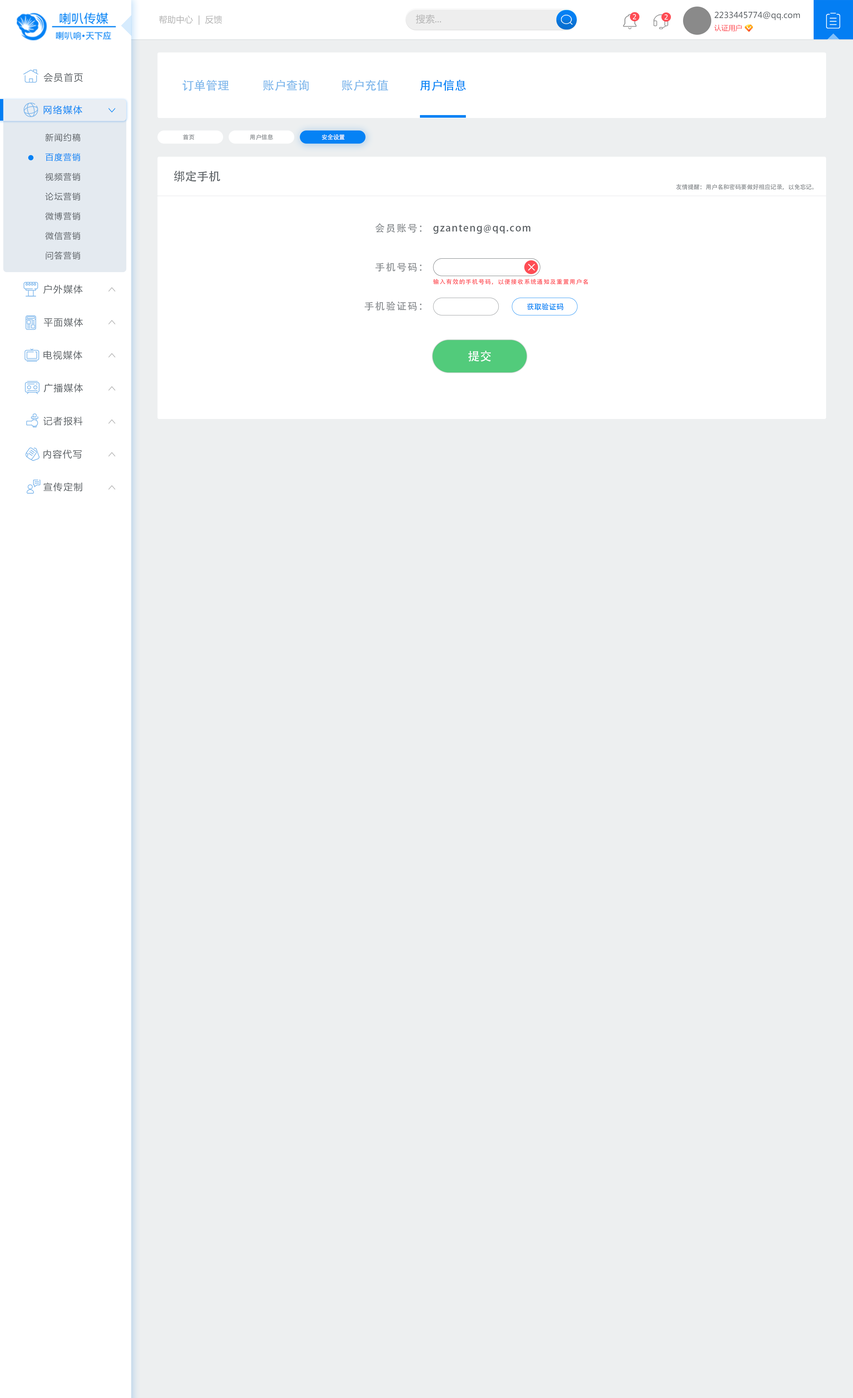
<style>
.page{position:relative;width:853px;height:1398px;background:#edeff0}
.page>*{position:absolute;margin:0}
.t1{font:8.6px "MicrosoftYaHei";color:#b4b4b4}
.t2{font:9.4px "MicrosoftYaHei";color:#b4b4b4}
.t3{font:6.9px "Tahoma";letter-spacing:0.1em;color:#ffffff;text-transform:uppercase}
.t4{font:8.2px/12.3px "MicrosoftYaHei";color:#5c6165}
.t5{font:7.1px/12.3px "MicrosoftYaHei";color:#fe4d55}
.t6{font:9.2px "MicrosoftYaHei";letter-spacing:0.1em;color:#5c6165}
.t7{font:11.8px "AdobeHeitiStd-Regular";color:#7db6eb}
.t8{font:11.8px "AdobeHeitiStd-Regular";color:#0582f5}
.t9{font:9.2px "MicrosoftYaHei";letter-spacing:0.1em;color:#0582f5}
.t10{font:8.2px/19.7px "MicrosoftYaHei";letter-spacing:0.1em;color:#5c6165}
.t11{font:8.2px/19.7px "MicrosoftYaHei";letter-spacing:0.1em;color:#0381f5}
.t12{font:5.9px "AdobeHeitiStd-Regular";color:#878b8e}
.t13{font:5.9px "AdobeHeitiStd-Regular";color:#fefefe}
.t14{font:11.8px "AdobeHeitiStd-Regular";color:#5c6165}
.t15{font:9.8px "AdobeHeitiStd-Regular";letter-spacing:0.1em;color:#878b8e}
.t16{font:9.8px "AdobeHeitiStd-Regular";letter-spacing:0.1em;color:#5c6165}
.t17{font:5.9px "AdobeHeitiStd-Regular";letter-spacing:0.1em;color:#fe4d55}
.t18{font:7.4px "AdobeHeitiStd-Regular";color:#0582f5}
.t19{font:11.8px "AdobeHeitiStd-Regular";color:#fefefe}
</style>
<div class="page">
<p class="t1" style="left:159px;top:15px;width:63px;height:10px">帮助中心  |  反馈</p>
<p class="t2" style="left:416px;top:14px;width:25px;height:10px">搜索...</p>
<p class="t3" style="left:633px;top:14px;width:3px;height:5px">2</p>
<p class="t3" style="left:664px;top:14px;width:4px;height:6px">2</p>
<p class="t4" style="left:714px;top:11px;width:86px;height:20px">2233445774@qq.com<br><span class="t5">认证用户</span></p>
<p class="t6" style="left:44px;top:73px;width:39px;height:9px">会员首页</p>
<p class="t7" style="left:182px;top:80px;width:47px;height:11px">订单管理</p>
<p class="t7" style="left:263px;top:80px;width:46px;height:11px">账户查询</p>
<p class="t7" style="left:341px;top:80px;width:47px;height:11px">账户充值</p>
<p class="t8" style="left:420px;top:80px;width:46px;height:11px">用户信息</p>
<p class="t9" style="left:44px;top:105px;width:38px;height:9px">网络媒体</p>
<p class="t10" style="left:45px;top:133px;width:35px;height:127px">新闻约稿<br><span class="t11">百度营销<br></span>视频营销<br>论坛营销<br>微博营销<br>微信营销<br>问答营销</p>
<p class="t12" style="left:183px;top:134px;width:11px;height:6px">首页</p>
<p class="t12" style="left:250px;top:134px;width:23px;height:6px">用户信息</p>
<p class="t13" style="left:322px;top:134px;width:23px;height:6px">安全设置</p>
<p class="t14" style="left:174px;top:171px;width:46px;height:11px">绑定手机</p>
<p class="t12" style="left:676px;top:184px;width:137px;height:6px">友情提醒：用户名和密码要做好相应记录，以免忘记。</p>
<p class="t15" style="left:375px;top:223px;width:46px;height:10px">会员账号：</p>
<p class="t16" style="left:433px;top:225px;width:97px;height:9px">gzanteng@qq.com</p>
<p class="t15" style="left:375px;top:263px;width:46px;height:9px">手机号码：</p>
<p class="t17" style="left:433px;top:279px;width:155px;height:6px">输入有效的手机号码，以便接收系统通知及重置用户名</p>
<p class="t6" style="left:43px;top:285px;width:40px;height:9px">户外媒体</p>
<p class="t15" style="left:364px;top:301px;width:57px;height:10px">手机验证码：</p>
<p class="t18" style="left:527px;top:303px;width:36px;height:7px">获取验证码</p>
<p class="t6" style="left:44px;top:318px;width:39px;height:9px">平面媒体</p>
<p class="t6" style="left:43px;top:351px;width:39px;height:9px">电视媒体</p>
<p class="t19" style="left:468px;top:351px;width:23px;height:11px">提交</p>
<p class="t6" style="left:44px;top:383px;width:39px;height:10px">广播媒体</p>
<p class="t6" style="left:43px;top:417px;width:40px;height:9px">记者报料</p>
<p class="t6" style="left:43px;top:450px;width:39px;height:9px">内容代写</p>
<p class="t6" style="left:43px;top:482px;width:39px;height:10px">宣传定制</p>
</div>
